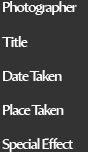
<style>
.page{position:relative;width:88px;height:152px;background:#333333}
.page>*{position:absolute;margin:0}
.t1{font:14.7px "AmiraParadiso";letter-spacing:-0.08em;color:#ffffff}
</style>
<div class="page">
<p class="t1" style="left:3px;top:1px;width:74px;height:14px">Photographer</p>
<p class="t1" style="left:2px;top:36px;width:26px;height:11px">Title</p>
<p class="t1" style="left:3px;top:70px;width:59px;height:11px">Date Taken</p>
<p class="t1" style="left:3px;top:104px;width:61px;height:11px">Place Taken</p>
<p class="t1" style="left:2px;top:138px;width:72px;height:14px">Special Effect</p>
</div>
